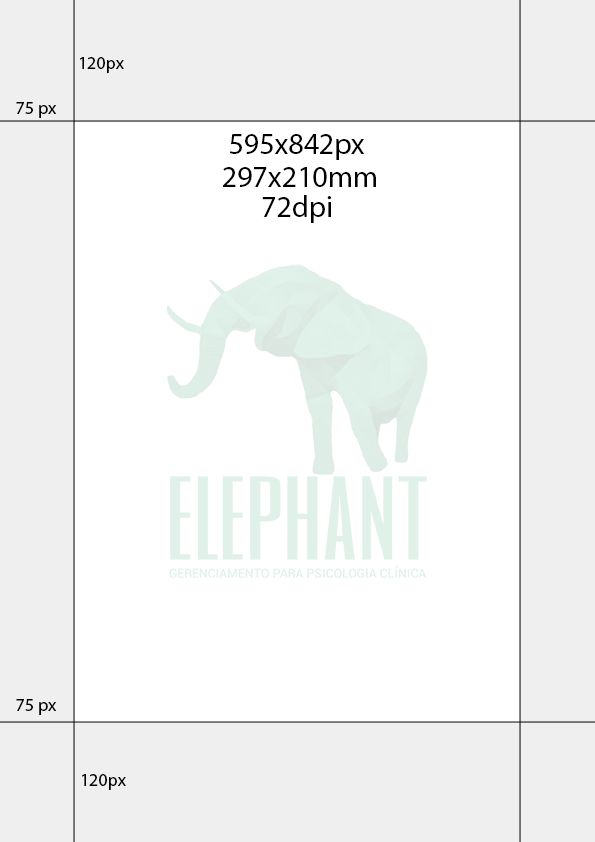
<style>
.page{position:relative;width:595px;height:842px;background:#efefef}
.page>*{position:absolute;margin:0}
.t1{font:18px "MyriadPro-Regular";color:#000000}
.t2{font:30px "MyriadPro-Regular";color:#000000}
</style>
<div class="page">
<p class="t1" style="left:80px;top:57px;width:44px;height:16px">120px</p>
<p class="t1" style="left:16px;top:102px;width:41px;height:16px">75 px</p>
<p class="t2" style="left:229px;top:134px;width:136px;height:26px">595x842px</p>
<p class="t2" style="left:223px;top:167px;width:153px;height:20px">297x210mm</p>
<p class="t2" style="left:262px;top:195px;width:69px;height:28px">72dpi</p>
<p class="t1" style="left:16px;top:699px;width:41px;height:16px">75 px</p>
<p class="t1" style="left:82px;top:774px;width:44px;height:16px">120px</p>
</div>
